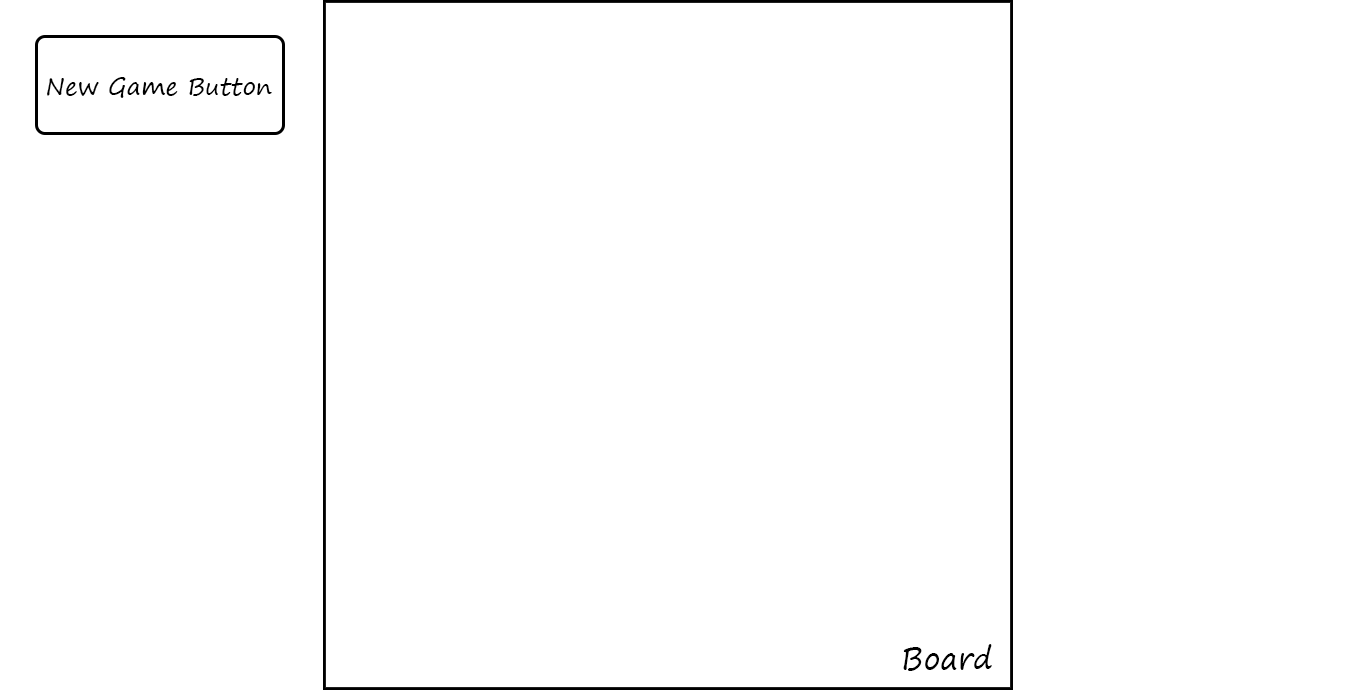
<style>
.page{position:relative;width:1360px;height:690px;background:#ffffff}
.page>*{position:absolute;margin:0}
.t1{font:24px "SegoePrint";color:#000000}
.t2{font:30px "SegoePrint";color:#000000}
</style>
<div class="page">
<p class="t1" style="left:47px;top:77px;width:225px;height:21px">New Game Button</p>
<p class="t2" style="left:903px;top:644px;width:89px;height:27px">Board</p>
</div>
